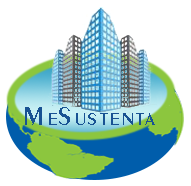
<style>
.page{position:relative;width:191px;height:186px;background:#ffffff}
.page>*{position:absolute;margin:0}
.t1{font:27.2px "Exotic350BT-DemiBold";letter-spacing:0.075em;color:#185293;font-variant:small-caps}
</style>
<div class="page">
<p class="t1" style="left:25px;top:107px;width:130px;height:18px">MeSustenta</p>
</div>
